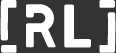
<style>
.page{position:relative;width:116px;height:53px;background:#333333}
.page>*{position:absolute;margin:0}
.t1{font:60px "LEIXO-Bold";color:#ffffff}
</style>
<div class="page">
<p class="t1" style="left:0px;top:0px;width:116px;height:53px">[RL]</p>
</div>
